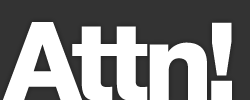
<style>
.page{position:relative;width:250px;height:100px;background:#ffffff}
.page>*{position:absolute;margin:0}
.t1{font:110px "HelveticaNeueLTStd-Hv";letter-spacing:-0.01em;color:#ffffff}
</style>
<div class="page">
<p class="t1" style="left:2px;top:22px;width:230px;height:80px">Attn!</p>
</div>
